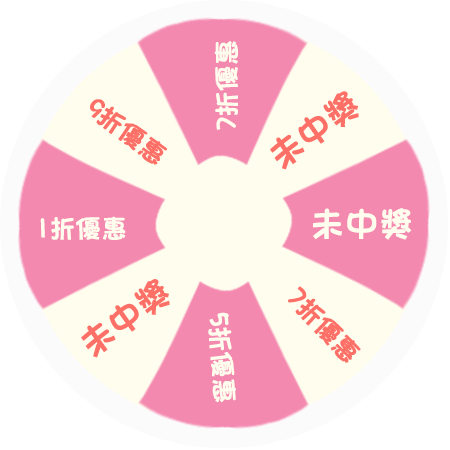
<style>
.page{position:relative;width:450px;height:450px;background:#fffdee}
.page>*{position:absolute;margin:0}
.t1{font:25.2px "DFFangYuan-W7-WIN-BF";color:#fffdee;font-weight:bold}
.t2{font:25.2px "DFFangYuan-W7-WIN-BF";color:#fd7067;font-weight:bold}
.t3{font:33.6px "DFFangYuan-W7-WIN-BF";color:#fd7067;font-weight:bold}
.t4{font:33.6px "DFFangYuan-W7-WIN-BF";color:#fffdee;font-weight:bold}
</style>
<div class="page">
<p class="t1" style="left:214px;top:41px;width:24px;height:89px;rotate:-90deg">7折優惠</p>
<p class="t2" style="left:90px;top:99px;width:77px;height:66px;rotate:37deg">9折優惠</p>
<p class="t3" style="left:270px;top:91px;width:89px;height:79px;rotate:-36deg">未中獎</p>
<p class="t4" style="left:313px;top:208px;width:99px;height:32px">未中獎</p>
<p class="t1" style="left:40px;top:216px;width:86px;height:24px">1折優惠</p>
<p class="t3" style="left:81px;top:279px;width:89px;height:79px;rotate:-36deg">未中獎</p>
<p class="t2" style="left:288px;top:286px;width:73px;height:77px;rotate:47deg">7折優惠</p>
<p class="t1" style="left:208px;top:312px;width:28px;height:91px;rotate:86deg">5折優惠</p>
</div>
